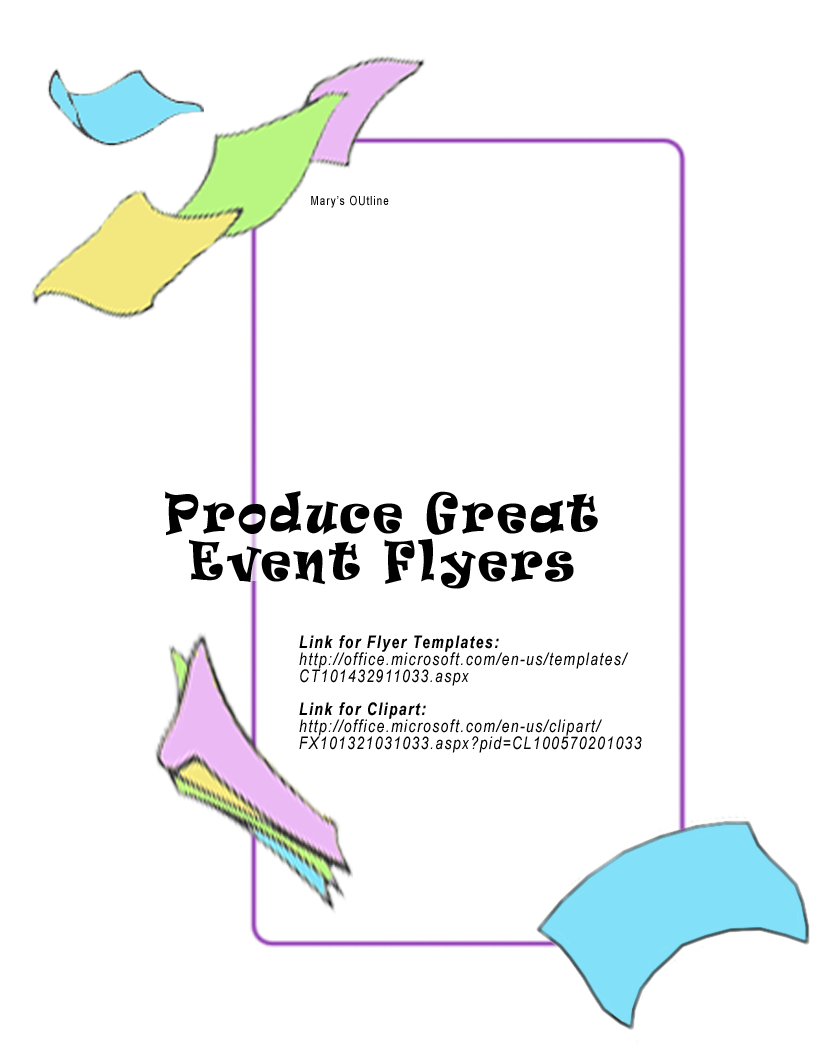
<style>
.page{position:relative;width:816px;height:1056px;background:#ffffff}
.page>*{position:absolute;margin:0}
.t1{font:12.5px "ArialMT";letter-spacing:0.1em;color:#000000;scale:0.8 1}
.t2{font:50px "Ravie";letter-spacing:0.1em;color:#000000;scale:0.8 1}
.t3{font:17.5px "Arial-ItalicMT";letter-spacing:0.1em;color:#000000;scale:0.8 1}
.t4{font:17.5px "Arial-BoldItalicMT";letter-spacing:0.1em;color:#000000;scale:0.8 1}
</style>
<div class="page">
<p class="t1" style="left:311px;top:195px;width:78px;height:13px">Mary’s OUtline</p>
<p class="t2" style="left:165px;top:491px;width:433px;height:98px;text-align:center">Produce Great<br>Event Flyers</p>
<p class="t3" style="left:299px;top:635px;width:343px;height:118px"><span class="t4">Link for Flyer Templates:<br></span>http://office.microsoft.com/en-us/templates/<br>CT101432911033.aspx<br><br><span class="t4">Link for Clipart:<br></span>http://office.microsoft.com/en-us/clipart/<br>FX101321031033.aspx?pid=CL100570201033</p>
</div>
